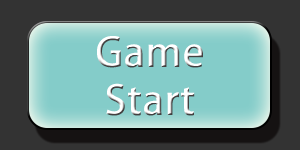
<style>
.page{position:relative;width:300px;height:150px;background:#333333}
.page>*{position:absolute;margin:0}
.t1{font:40px/48px "AdobeFanHeitiStd-Bold";letter-spacing:0.02em}
</style>
<div class="page">
<p class="t1" style="left:97px;top:36px;width:106px;height:80px;text-align:center">Game<br>Start</p>
</div>
